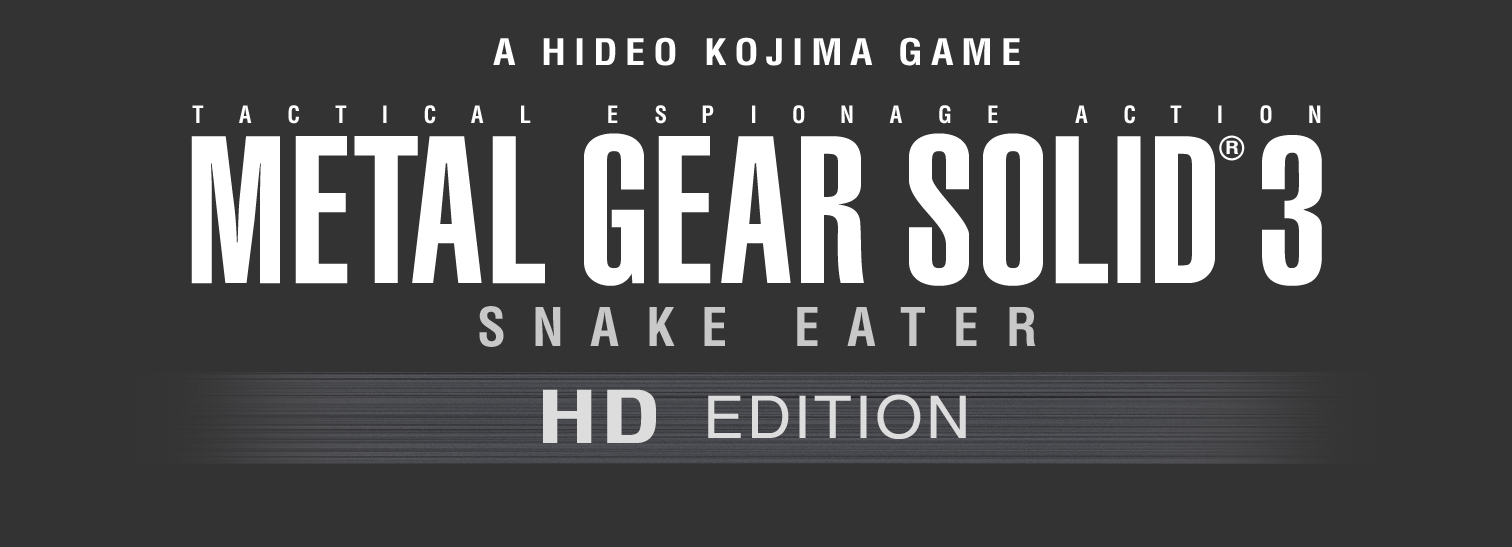
<style>
.page{position:relative;width:1512px;height:547px;background:#333333}
.page>*{position:absolute;margin:0}
.t1{font:35.8px "Helvetica-Condensed-Bold";letter-spacing:0.188em;color:#ffffff;scale:1.14 1}
.t2{font:23.3px "Helvetica-Condensed-Bold";letter-spacing:0.048em;color:#ffffff}
.t3{font:206.1px "Helvetica-UltraCompressed";letter-spacing:0.02em;color:#ffffff;scale:1.05 1}
.t4{font:206.1px "Helvetica-UltraCompressed";letter-spacing:0.048em;color:#ffffff;scale:1.05 1}
.t5{font:32px "Helvetica-Condensed-Bold";letter-spacing:0.048em;color:#ffffff}
.t6{font:206.7px "Helvetica-UltraCompressed";letter-spacing:0.048em;color:#ffffff;scale:1.04 1}
.t7{font:17.5px "Helvetica-Condensed-Bold";letter-spacing:0.048em;color:#ffffff;scale:1.37 1}
.t8{font:51.9px "Helvetica-Condensed-Bold";letter-spacing:0.5em;color:#c8c8c8}
.t9{font:51.9px "Helvetica-Condensed-Bold";letter-spacing:0.525em;color:#c8c8c8}
.t10{font:70.9px "Helvetica-Condensed-Bold";letter-spacing:0.02em;color:#dddddd;scale:1.44 1}
.t11{font:59px "Helvetica";letter-spacing:0.048em;color:#dddddd;scale:1.04 1}
</style>
<div class="page">
<p class="t1" style="left:493px;top:37px;width:527px;height:29px">A HIDEO KOJIMA GAME</p>
<p class="t2" style="left:192px;top:105px;width:12px;height:18px">T</p>
<p class="t2" style="left:239px;top:105px;width:13px;height:18px">A</p>
<p class="t2" style="left:288px;top:105px;width:11px;height:19px">C</p>
<p class="t2" style="left:335px;top:105px;width:12px;height:18px">T</p>
<p class="t2" style="left:383px;top:105px;width:4px;height:18px">I</p>
<p class="t2" style="left:424px;top:105px;width:12px;height:19px">C</p>
<p class="t2" style="left:471px;top:105px;width:13px;height:18px">A</p>
<p class="t2" style="left:521px;top:105px;width:10px;height:18px">L</p>
<p class="t2" style="left:608px;top:105px;width:10px;height:18px">E</p>
<p class="t2" style="left:655px;top:105px;width:11px;height:19px">S</p>
<p class="t2" style="left:702px;top:105px;width:12px;height:18px">P</p>
<p class="t2" style="left:752px;top:105px;width:4px;height:18px">I</p>
<p class="t2" style="left:793px;top:105px;width:12px;height:19px">O</p>
<p class="t2" style="left:841px;top:105px;width:12px;height:18px">N</p>
<p class="t2" style="left:889px;top:105px;width:13px;height:18px">A</p>
<p class="t2" style="left:939px;top:105px;width:12px;height:19px">G</p>
<p class="t2" style="left:988px;top:105px;width:10px;height:18px">E</p>
<p class="t2" style="left:1075px;top:105px;width:13px;height:18px">A</p>
<p class="t2" style="left:1124px;top:105px;width:11px;height:19px">C</p>
<p class="t2" style="left:1170px;top:105px;width:12px;height:18px">T</p>
<p class="t2" style="left:1218px;top:105px;width:4px;height:18px">I</p>
<p class="t2" style="left:1260px;top:105px;width:12px;height:19px">O</p>
<p class="t2" style="left:1309px;top:105px;width:12px;height:18px">N</p>
<p class="t3" style="left:191px;top:136px;width:89px;height:148px">M</p>
<p class="t4" style="left:295px;top:136px;width:53px;height:148px">E</p>
<p class="t4" style="left:354px;top:136px;width:64px;height:147px">T</p>
<p class="t4" style="left:412px;top:136px;width:70px;height:147px">A</p>
<p class="t4" style="left:492px;top:136px;width:53px;height:148px">L</p>
<p class="t4" style="left:584px;top:133px;width:60px;height:153px">G</p>
<p class="t4" style="left:658px;top:136px;width:53px;height:148px">E</p>
<p class="t4" style="left:721px;top:136px;width:70px;height:147px">A</p>
<p class="t4" style="left:801px;top:136px;width:63px;height:147px">R</p>
<p class="t4" style="left:909px;top:133px;width:60px;height:153px">S</p>
<p class="t4" style="left:983px;top:133px;width:60px;height:153px">O</p>
<p class="t4" style="left:1055px;top:136px;width:53px;height:148px">L</p>
<p class="t4" style="left:1117px;top:136px;width:24px;height:147px">I</p>
<p class="t4" style="left:1155px;top:136px;width:60px;height:147px">D</p>
<p class="t5" style="left:1219px;top:135px;width:26px;height:26px">®</p>
<p class="t6" style="left:1262px;top:135px;width:60px;height:151px">3</p>
<p class="t7" style="left:1226px;top:140px;width:13px;height:14px">R</p>
<p class="t8" style="left:479px;top:306px;width:246px;height:41px">SNAKE</p>
<p class="t9" style="left:797px;top:307px;width:239px;height:39px">EATER</p>
<p class="t10" style="left:543px;top:389px;width:113px;height:54px">HD</p>
<p class="t11" style="left:708px;top:394px;width:258px;height:45px">EDITION</p>
</div>
